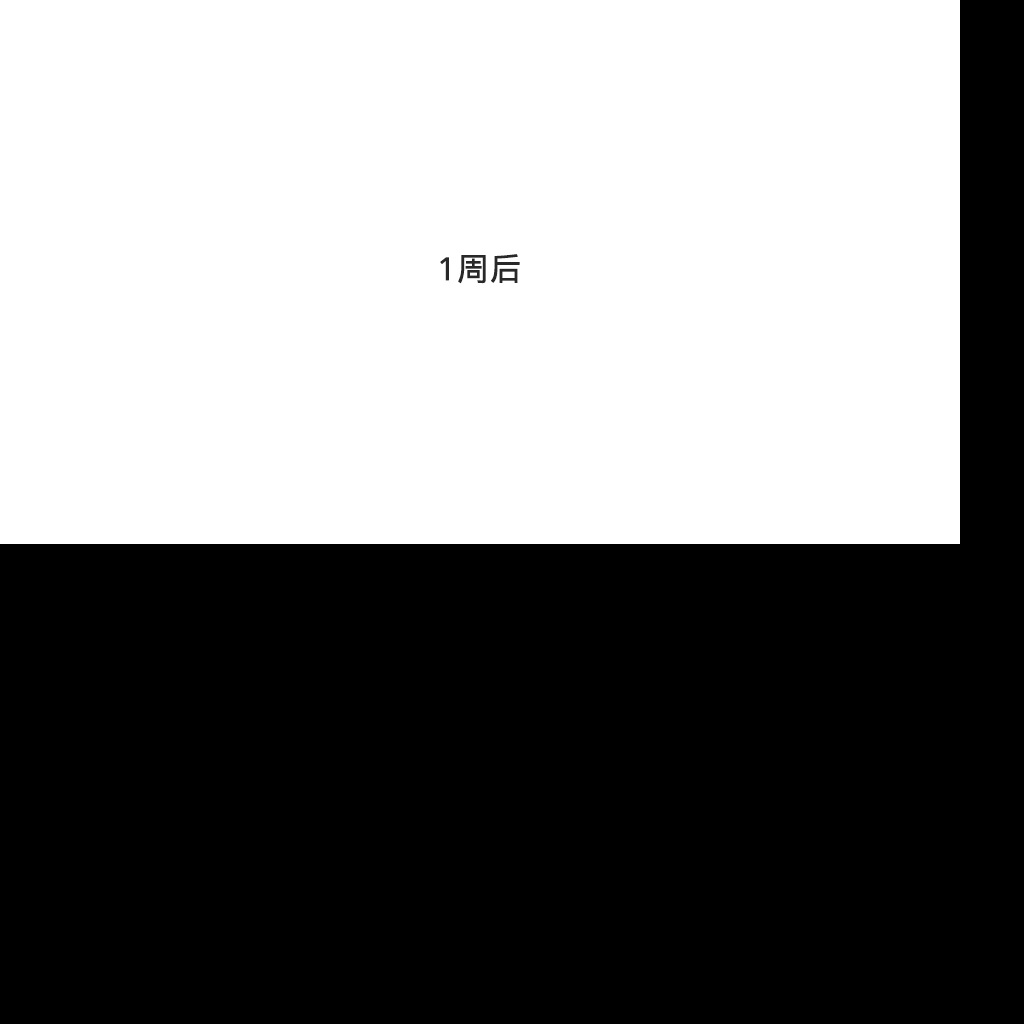
<style>
.page{position:relative;width:1024px;height:1024px;background:#000000}
.page>*{position:absolute;margin:0}
.t1{font:32px "WenQuanYiMicroHeiMono";color:#292829;font-weight:bold}
</style>
<div class="page">
<p class="t1" style="left:440px;top:254px;width:80px;height:30px">1周后</p>
</div>
